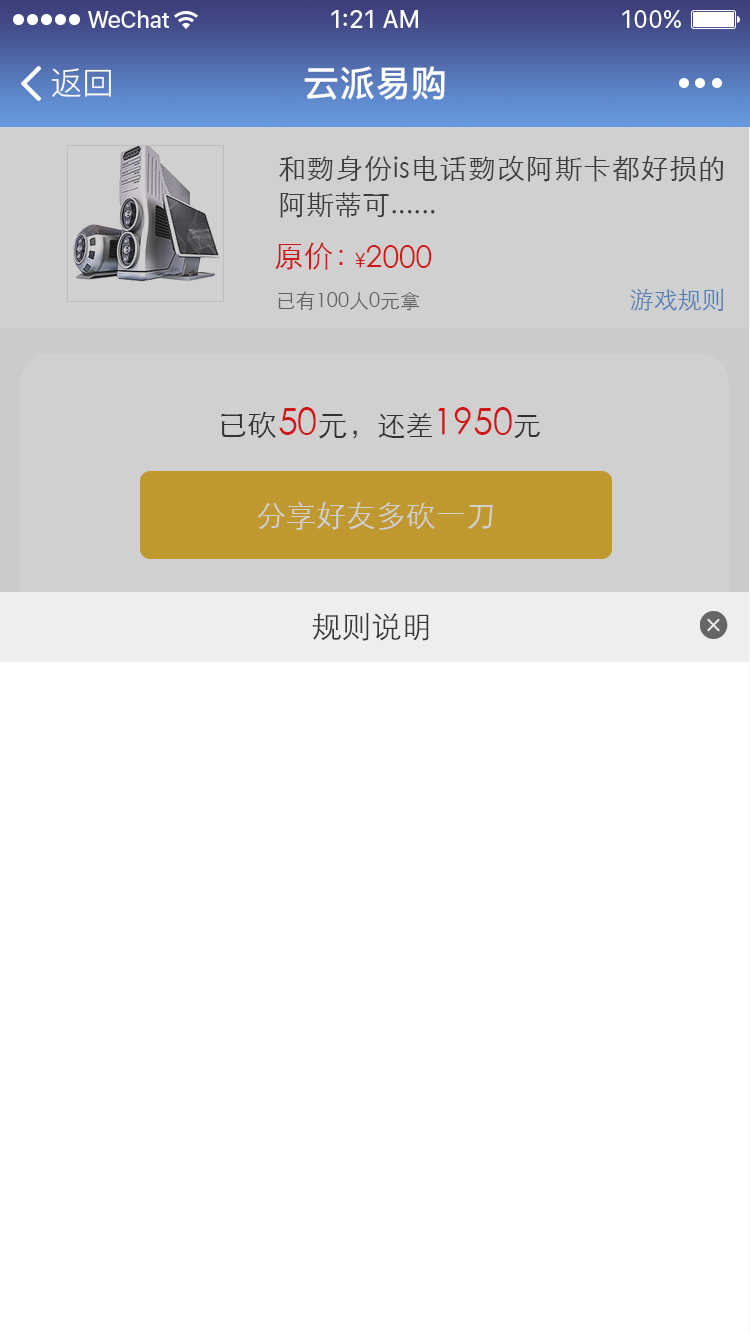
<style>
.page{position:relative;width:750px;height:1334px;background:#ffffff}
.page>*{position:absolute;margin:0}
.t1{font:32px "PingFang-SC-Regular";color:#ffffff}
.t2{font:36px "PingFang-SC-Bold";color:#ffffff}
.t3{font:28px/36px "STXihei";color:#333333}
.t4{font:30px "STXihei";color:#d01616}
.t5{font:20px "STXihei";color:#d01616}
.t6{font:20px "STXihei";color:#666666}
.t7{font:24px "STXihei";color:#557fb7}
.t8{font:36px "STXihei"}
.t9{font:30px "STXihei"}
.t10{font:28px "STXihei"}
.t11{font:30px "STXihei";color:#d0d0d0}
.t12{font:30px "STXihei";color:#373737}
</style>
<div class="page">
<p class="t1" style="left:52px;top:68px;width:59px;height:29px">返回</p>
<p class="t2" style="left:304px;top:66px;width:141px;height:34px">云派易购</p>
<p class="t3" style="left:279px;top:155px;width:445px;height:63px;text-align:justify">和覅身份is电话覅改阿斯卡都好损的阿斯蒂可......</p>
<p class="t4" style="left:275px;top:242px;width:68px;height:28px">原价：</p>
<p class="t4" style="left:355px;top:245px;width:77px;height:23px"><span class="t5">¥</span>2000</p>
<p class="t6" style="left:278px;top:291px;width:142px;height:20px">已有100人0元拿</p>
<p class="t7" style="left:630px;top:288px;width:94px;height:23px">游戏规则</p>
<p class="t8" style="left:221px;top:407px;width:319px;height:32px"><span class="t9">已砍</span>50<span class="t9">元，</span><span class="t10">还差</span>1950<span class="t10">元</span></p>
<p class="t11" style="left:257px;top:502px;width:236px;height:28px">分享好友多砍一刀</p>
<p class="t12" style="left:312px;top:613px;width:117px;height:28px">规则说明</p>
</div>
